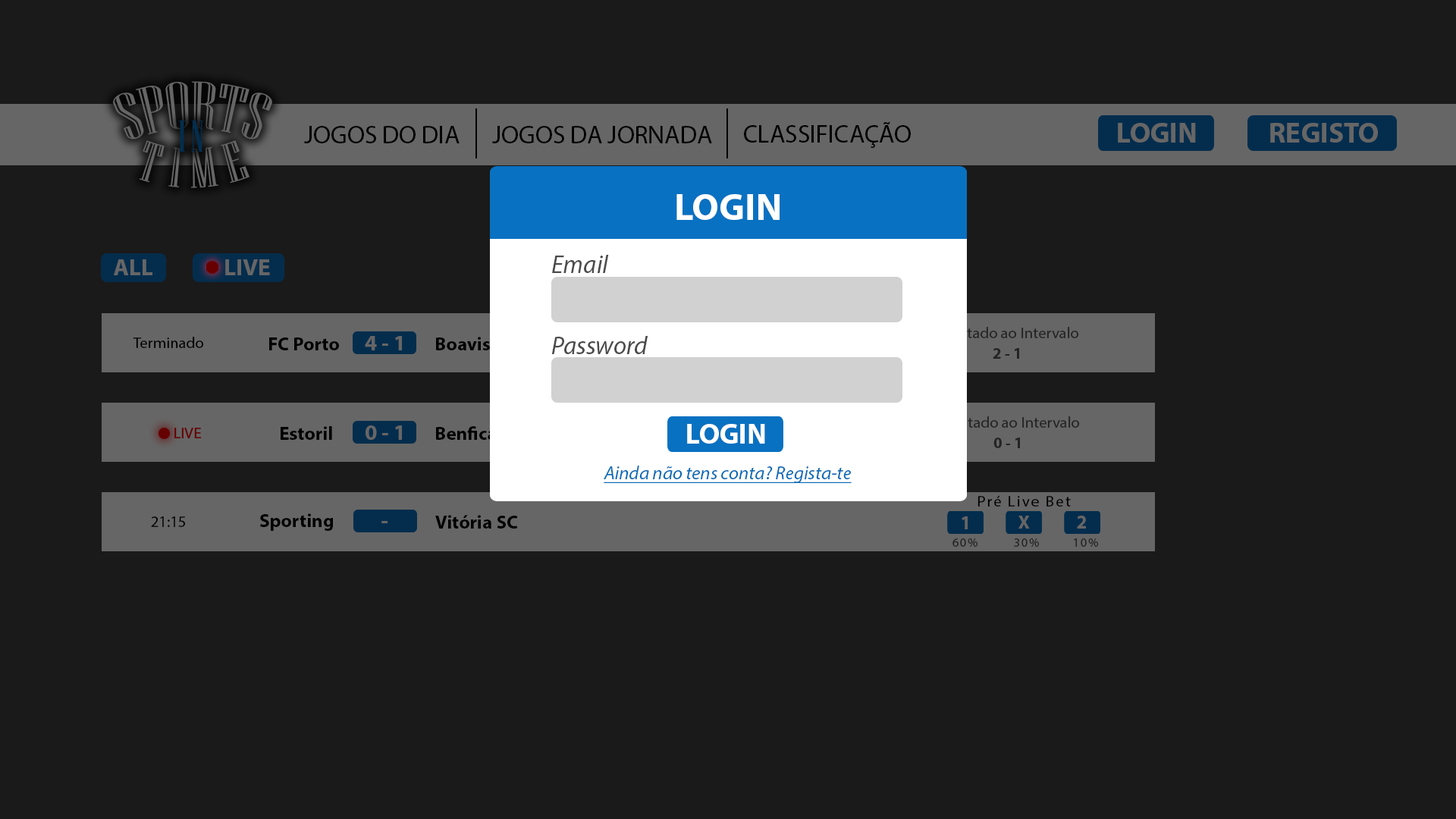
<style>
.page{position:relative;width:1456px;height:819px;background:#1a1a1a}
.page>*{position:absolute;margin:0}
.t1{font:25.3px "MyriadPro-Regular";color:#000000}
.t2{font:28.4px "MyriadPro-Bold";color:#666666}
.t3{font:37.9px "MyriadPro-Bold";color:#ffffff}
.t4{font:25.3px "MyriadPro-It";color:#4b4b4b}
.t5{font:15.8px "MyriadPro-Regular";color:#000000}
.t6{font:19px "MyriadPro-Bold";color:#000000}
.t7{font:22.1px "MyriadPro-Bold";color:#666666}
.t8{font:15.8px "MyriadPro-Bold";color:#242424}
.t9{font:28.4px "MyriadPro-Bold";color:#ffffff}
.t10{font:19px "MyriadPro-It";color:#0b6cb7;text-decoration:underline}
.t11{font:15.8px "MyriadPro-Regular";letter-spacing:0.1em;color:#000000}
.t12{font:19px "MyriadPro-Bold";color:#666666}
.t13{font:12.6px "MyriadPro-Regular";letter-spacing:0.1em;color:#242424}
</style>
<div class="page">
<p class="t1" style="left:304px;top:126px;width:156px;height:17px">JOGOS DO DIA</p>
<p class="t1" style="left:492px;top:126px;width:220px;height:17px">JOGOS DA JORNADA</p>
<p class="t1" style="left:744px;top:121px;width:167px;height:27px">CLASSIFICAÇÃO</p>
<p class="t2" style="left:1118px;top:123px;width:78px;height:20px">LOGIN</p>
<p class="t2" style="left:1270px;top:123px;width:108px;height:20px">REGISTO</p>
<p class="t3" style="left:676px;top:194px;width:104px;height:26px">LOGIN</p>
<p class="t4" style="left:552px;top:255px;width:57px;height:18px">Email</p>
<p class="t5" style="left:133px;top:337px;width:71px;height:11px">Terminado</p>
<p class="t6" style="left:269px;top:337px;width:70px;height:13px">FC Porto</p>
<p class="t7" style="left:365px;top:336px;width:37px;height:14px">4 - 1</p>
<p class="t6" style="left:436px;top:337px;width:71px;height:13px">Boavista</p>
<p class="t4" style="left:551px;top:336px;width:97px;height:18px">Password</p>
<p class="t8" style="left:993px;top:348px;width:26px;height:11px">2 - 1</p>
<p class="t7" style="left:366px;top:425px;width:36px;height:15px">0 - 1</p>
<p class="t9" style="left:687px;top:424px;width:78px;height:20px">LOGIN</p>
<p class="t6" style="left:281px;top:426px;width:51px;height:14px">Estoril</p>
<p class="t6" style="left:436px;top:426px;width:61px;height:14px">Benfica</p>
<p class="t8" style="left:993px;top:438px;width:27px;height:10px">0 - 1</p>
<p class="t10" style="left:604px;top:466px;width:248px;height:17px">Ainda não tens conta? Regista-te</p>
<p class="t11" style="left:977px;top:495px;width:94px;height:12px">Pré Live Bet</p>
<p class="t5" style="left:151px;top:516px;width:35px;height:11px">21:15</p>
<p class="t6" style="left:260px;top:513px;width:73px;height:18px">Sporting</p>
<p class="t7" style="left:381px;top:521px;width:7px;height:2px">-</p>
<p class="t6" style="left:435px;top:515px;width:83px;height:14px">Vitória SC</p>
<p class="t12" style="left:962px;top:516px;width:6px;height:13px">1</p>
<p class="t12" style="left:1018px;top:516px;width:12px;height:13px">X</p>
<p class="t12" style="left:1077px;top:516px;width:9px;height:13px">2</p>
<p class="t13" style="left:952px;top:538px;width:25px;height:9px">60%</p>
<p class="t13" style="left:1014px;top:538px;width:25px;height:9px">30%</p>
<p class="t13" style="left:1074px;top:538px;width:24px;height:9px">10%</p>
</div>
